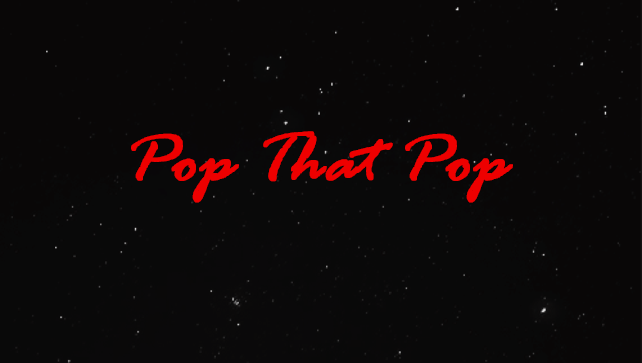
<style>
.page{position:relative;width:642px;height:363px;background:#090707}
.page>*{position:absolute;margin:0}
.t1{font:72px "RageItalic";color:#ee0000;font-weight:bold}
</style>
<div class="page">
<p class="t1" style="left:131px;top:131px;width:382px;height:72px">Pop That Pop</p>
</div>
